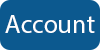
<style>
.page{position:relative;width:100px;height:50px;background:#0c598f}
.page>*{position:absolute;margin:0}
.t1{font:26px "MyriadPro-Regular";color:#ffffff}
</style>
<div class="page">
<p class="t1" style="left:5px;top:15px;width:90px;height:18px">Account</p>
</div>
